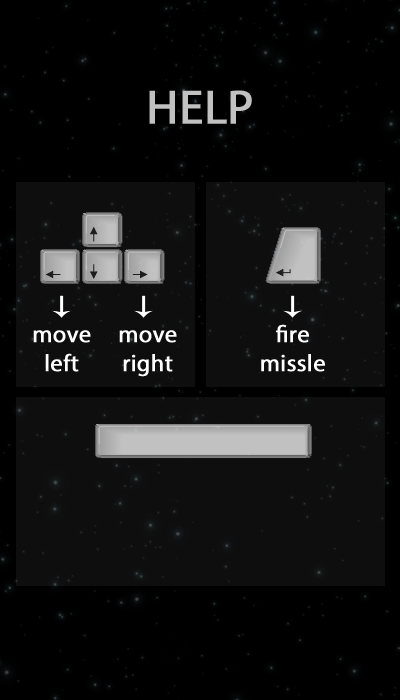
<style>
.page{position:relative;width:400px;height:700px;background:#000000}
.page>*{position:absolute;margin:0}
.t1{font:48px "MyriadPro-Regular";color:#c1c1c1;font-weight:bold}
.t2{font:24px "MyriadPro-Regular";color:#ffffff;font-weight:bold}
</style>
<div class="page">
<p class="t1" style="left:149px;top:90px;width:103px;height:34px">HELP</p>
<p class="t2" style="left:261px;top:324px;width:64px;height:48px;text-align:center">fire<br>missle</p>
<p class="t2" style="left:33px;top:330px;width:58px;height:42px;text-align:center">move<br>left</p>
<p class="t2" style="left:119px;top:330px;width:58px;height:47px;text-align:center">move<br>right</p>
</div>
